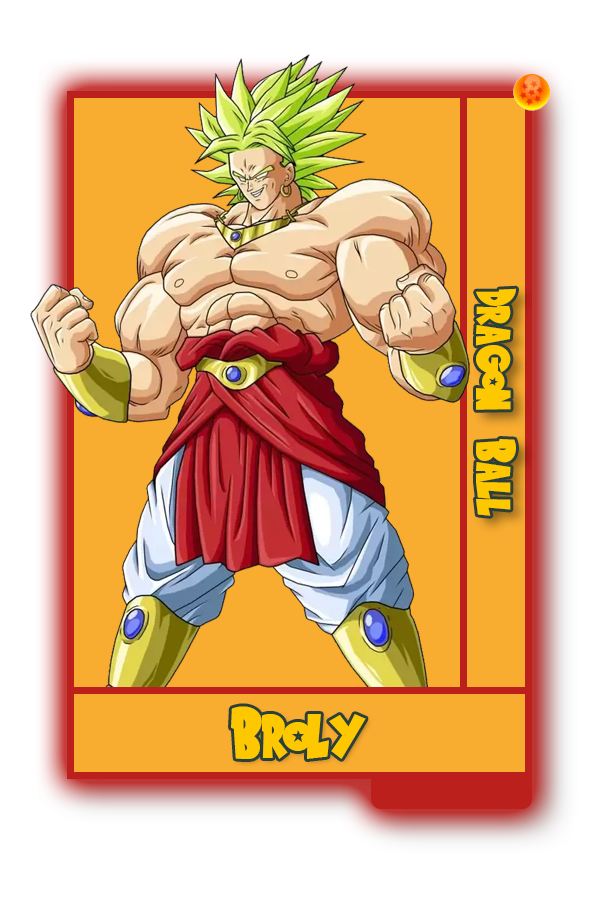
<style>
.page{position:relative;width:600px;height:900px;background:#f8ac30}
.page>*{position:absolute;margin:0}
.t1{font:56.9px "SaiyanSans";color:#fec800}
.t2{font:75px "SaiyanSans";color:#fec800}
</style>
<div class="page">
<p class="t1" style="left:476px;top:288px;width:40px;height:228px;rotate:90deg">Dragon Ball</p>
<p class="t2" style="left:231px;top:706px;width:135px;height:53px">Broly</p>
</div>
